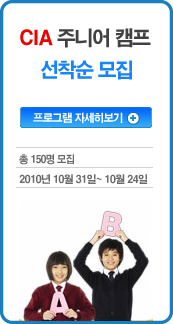
<style>
.page{position:relative;width:173px;height:324px;background:#ffffff}
.page>*{position:absolute;margin:0}
.t1{font:20px "H2gtrE";letter-spacing:-0.075em;color:#414141;scale:0.95 1}
.t2{font:20px "H2gtrE";letter-spacing:-0.075em;color:#ee0000;scale:0.95 1}
.t3{font:20px "H2gtrE";letter-spacing:-0.075em;color:#1784fa;scale:0.95 1}
.t4{font:11px "H2gtrE";letter-spacing:-0.075em;color:#ffffff;scale:0.95 1}
.t5{font:10.5px "H2gtrE";letter-spacing:-0.075em;color:#6a6a6a;scale:0.9 1}
.t6{font:10.5px "H2gtrE";letter-spacing:-0.075em;color:#6a6a6a;scale:0.95 1}
</style>
<div class="page">
<p class="t1" style="left:20px;top:28px;width:131px;height:20px"><span class="t2">CIA</span> 주니어 캠프</p>
<p class="t3" style="left:40px;top:60px;width:93px;height:20px">선착순 모집</p>
<p class="t4" style="left:33px;top:112px;width:90px;height:11px">프로그램 자세히보기</p>
<p class="t5" style="left:19px;top:154px;width:55px;height:11px">총 150명 모집</p>
<p class="t6" style="left:19px;top:174px;width:129px;height:10px">2010년 10월 31일~ 10월 24일</p>
</div>
